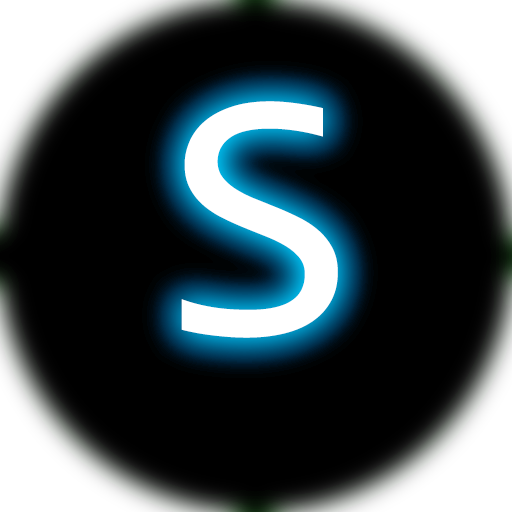
<style>
.page{position:relative;width:512px;height:512px;background:#000000}
.page>*{position:absolute;margin:0}
.t1{font:360px "Consolas";color:#ffffff}
</style>
<div class="page">
<p class="t1" style="left:181px;top:101px;width:157px;height:237px">S</p>
</div>
